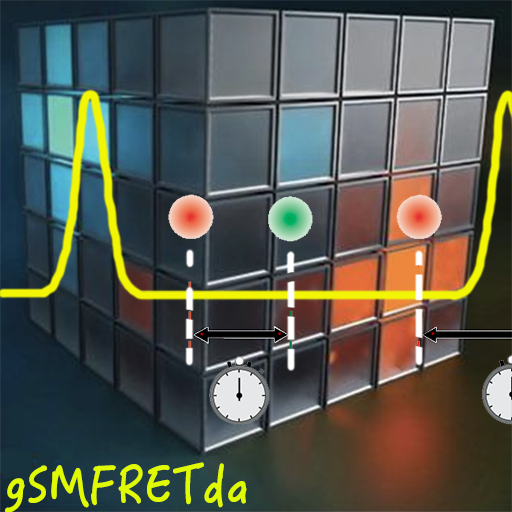
<style>
.page{position:relative;width:512px;height:512px}
.page>*{position:absolute;margin:0}
.t1{font:49.1px "HanziPenSC-W3";color:#e0fa04;font-weight:bold}
</style>
<div class="page">
<p class="t1" style="left:4px;top:462px;width:243px;height:51px">gSMFRETda</p>
</div>
